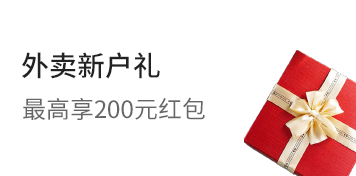
<style>
.page{position:relative;width:356px;height:176px;background:#ffffff}
.page>*{position:absolute;margin:0}
.t1{font:28px "SourceHanSansCN-Medium";color:#222222}
.t2{font:24px "SourceHanSansCN-Regular";color:#666666}
</style>
<div class="page">
<p class="t1" style="left:22px;top:52px;width:138px;height:27px">外卖新户礼</p>
<p class="t2" style="left:23px;top:97px;width:182px;height:23px">最高享200元红包</p>
</div>
